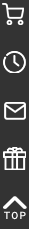
<style>
.page{position:relative;width:29px;height:229px;background:#333333}
.page>*{position:absolute;margin:0}
.t1{font:10px "Roboto-Regular";letter-spacing:0.147em;color:#ffffff}
</style>
<div class="page">
<p class="t1" style="left:4px;top:211px;width:22px;height:9px">TOP</p>
</div>
